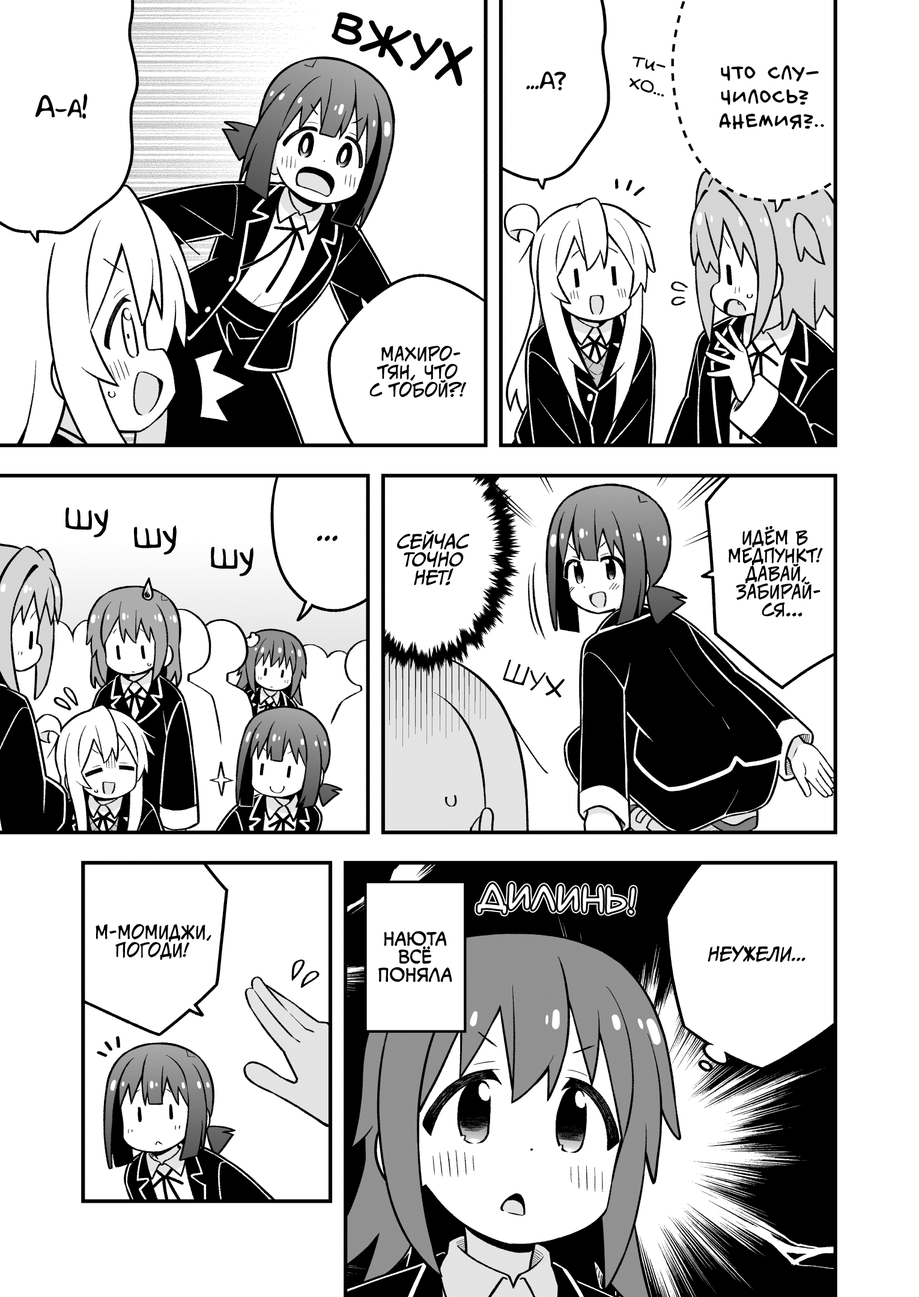
<style>
.page{position:relative;width:919px;height:1297px;background:#ffffff}
.page>*{position:absolute;margin:0}
.t1{font:45.1px "v_CCMonologous";color:#000000}
.t2{font:21.6px "v_Augie";color:#000000}
.t3{font:24px "v_BillyTheFlyingRobotBBLC";color:#000000;text-transform:uppercase}
.t4{font:19.8px "AkbarPlain";color:#000000}
.t5{font:25.2px "AkbarPlain";color:#000000}
.t6{font:18px "v_CCJeffCampbell";color:#000000;text-transform:uppercase}
.t7{font:39.6px "v_Augie";color:#000000}
.t8{font:18px "CCMeanwhile";color:#000000;text-transform:uppercase;font-style:italic}
.t9{font:28.8px "KuraiVoice2";color:#000000;text-transform:uppercase}
.t10{font:28.8px "v_Augie";color:#000000;text-transform:uppercase;scale:0.9 1}
.t11{font:36px "laCartoonerie";color:#ffffff;text-transform:uppercase}
.t12{font:18px "v_CCMonologous";color:#000000;text-transform:uppercase}
</style>
<div class="page">
<p class="t1" style="left:332px;top:12px;width:141px;height:74px;rotate:18deg">вжух</p>
<p class="t2" style="left:629px;top:56px;width:37px;height:41px;text-align:center;rotate:16deg">ти-<br>хо...</p>
<p class="t3" style="left:719px;top:65px;width:105px;height:65px;text-align:center">Что слу-<br>чилось?<br>Анемия?..</p>
<p class="t4" style="left:526px;top:71px;width:40px;height:20px">...А?</p>
<p class="t5" style="left:35px;top:94px;width:53px;height:25px">А-а!</p>
<p class="t6" style="left:369px;top:346px;width:98px;height:52px;text-align:center">Махиро-<br>тян, что<br>с тобой?!</p>
<p class="t7" style="left:65px;top:508px;width:43px;height:30px;rotate:4deg">шу</p>
<p class="t7" style="left:134px;top:525px;width:43px;height:30px">шу</p>
<p class="t8" style="left:397px;top:530px;width:73px;height:56px;text-align:center">Сейчас<br>точно<br>нет!</p>
<p class="t6" style="left:729px;top:526px;width:94px;height:92px;text-align:center">Идём в<br>медпункт!<br>Давай,<br>забирай-<br>ся...</p>
<p class="t9" style="left:317px;top:536px;width:21px;height:5px">...</p>
<p class="t7" style="left:211px;top:547px;width:42px;height:30px;rotate:3deg">шу</p>
<p class="t10" style="left:503px;top:660px;width:62px;height:38px;rotate:21deg">шух</p>
<p class="t11" style="left:477px;top:884px;width:158px;height:30px;rotate:2deg">дилинь!</p>
<p class="t6" style="left:96px;top:924px;width:115px;height:36px;text-align:center">М-Момиджи,<br>погоди!</p>
<p class="t12" style="left:378px;top:931px;width:74px;height:52px;text-align:center">Наюта<br>всё<br>поняла</p>
<p class="t8" style="left:708px;top:945px;width:98px;height:18px">Неужели...</p>
</div>
